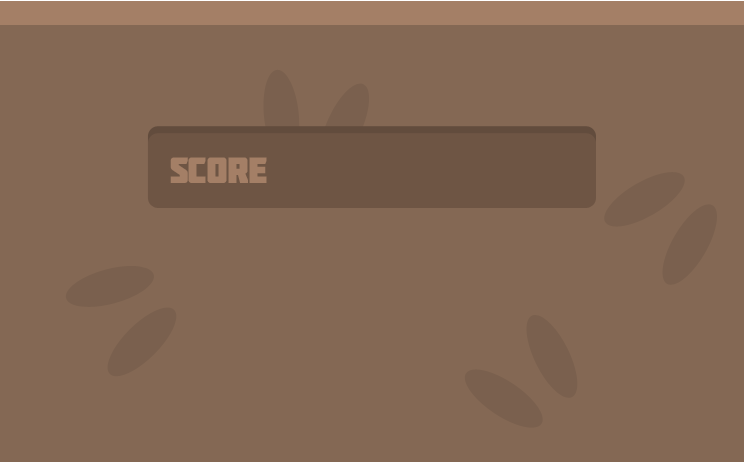
<style>
.page{position:relative;width:744px;height:462px;background:#846854}
.page>*{position:absolute;margin:0}
.t1{font:36.5px "Molot";letter-spacing:-0.02em;color:#a47f66}
</style>
<div class="page">
<p class="t1" style="left:170px;top:157px;width:97px;height:26px">Score</p>
</div>
